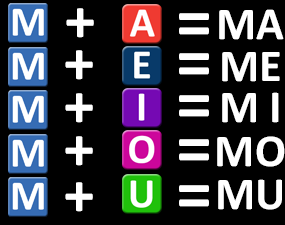
<style>
.page{position:relative;width:285px;height:225px;background:#000000}
.page>*{position:absolute;margin:0}
.t1{font:61.5px "Calibri-Bold";color:#ffffff}
.t2{font:72px "Calibri-Bold";color:#ffffff}
.t3{font:46px "Calibri-Bold";color:#ffffff}
</style>
<div class="page">
<p class="t1" style="left:66px;top:8px;width:28px;height:30px">+</p>
<p class="t2" style="left:179px;top:13px;width:30px;height:22px">=</p>
<p class="t3" style="left:219px;top:9px;width:65px;height:31px">MA</p>
<p class="t1" style="left:65px;top:50px;width:28px;height:30px">+</p>
<p class="t2" style="left:179px;top:53px;width:30px;height:22px">=</p>
<p class="t3" style="left:222px;top:52px;width:58px;height:30px">ME</p>
<p class="t1" style="left:65px;top:93px;width:28px;height:30px">+</p>
<p class="t2" style="left:179px;top:95px;width:30px;height:22px">=</p>
<p class="t3" style="left:222px;top:92px;width:57px;height:31px">M I</p>
<p class="t1" style="left:65px;top:136px;width:28px;height:30px">+</p>
<p class="t3" style="left:217px;top:136px;width:68px;height:31px">MO</p>
<p class="t2" style="left:179px;top:139px;width:30px;height:22px">=</p>
<p class="t1" style="left:65px;top:182px;width:28px;height:30px">+</p>
<p class="t2" style="left:179px;top:185px;width:30px;height:22px">=</p>
<p class="t3" style="left:218px;top:179px;width:64px;height:31px">MU</p>
</div>
